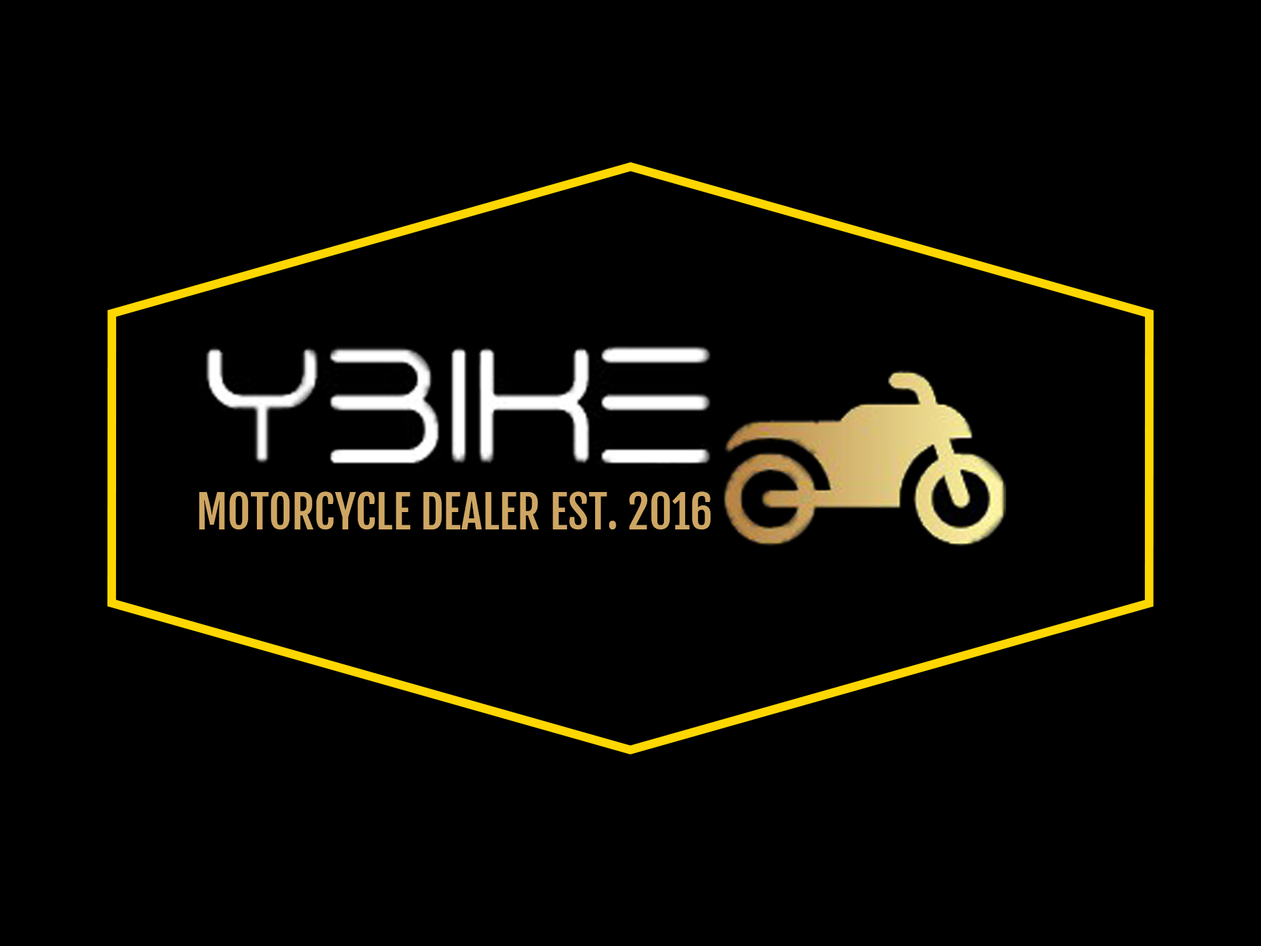
<style>
.page{position:relative;width:1261px;height:946px;background:#000000}
.page>*{position:absolute;margin:0}
.t1{font:44.5px "FjallaOne-Regular";color:#cea663}
</style>
<div class="page">
<p class="t1" style="left:199px;top:491px;width:512px;height:38px">MOTORCYCLE DEALER EST. 2016</p>
</div>
